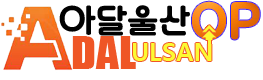
<style>
.page{position:relative;width:263px;height:80px;background:#ffffff}
.page>*{position:absolute;margin:0}
.t1{font:32.7px "TTSunflowerB";color:#010101}
.t2{font:49.1px "TTSunflowerB"}
.t3{font:41.8px "Impact";color:#ef5626;scale:1.08 1}
</style>
<div class="page">
<p class="t1" style="left:59px;top:5px;width:131px;height:31px">아달울산</p>
<p class="t2" style="left:192px;top:1px;width:68px;height:39px">OP</p>
<p class="t3" style="left:72px;top:36px;width:64px;height:33px">DAL</p>
</div>
